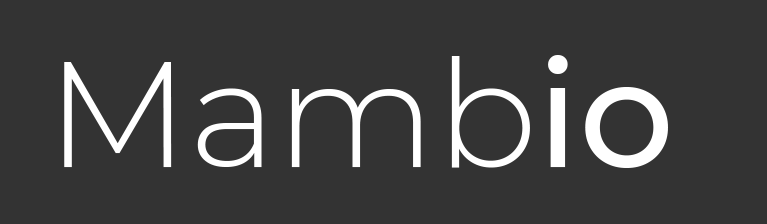
<style>
.page{position:relative;width:767px;height:224px;background:#333333}
.page>*{position:absolute;margin:0}
.t1{font:150px "Montserrat-Light";color:#ffffff}
.t2{font:150px "Montserrat-Medium";color:#ffffff}
</style>
<div class="page">
<p class="t1" style="left:64px;top:55px;width:604px;height:113px">Mamb<span class="t2">io</span></p>
</div>
